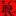
<style>
.page{position:relative;width:16px;height:16px;background:#ff0000}
.page>*{position:absolute;margin:0}
.t1{font:18px "Minion-Bold";color:#410000}
.t2{font:18px "Minion-Bold"}
</style>
<div class="page">
<p class="t1" style="left:0px;top:0px;width:7px;height:13px">I</p>
<p class="t2" style="left:2px;top:4px;width:12px;height:13px">R</p>
<p class="t2" style="left:6px;top:0px;width:12px;height:13px">C</p>
</div>
